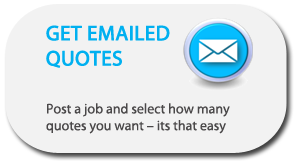
<style>
.page{position:relative;width:294px;height:165px;background:#f2f2f2}
.page>*{position:absolute;margin:0}
.t1{font:14px "MyriadPro-Regular";color:#4a4849}
.t2{font:21px "MyriadPro-Regular";color:#00b0f0;font-weight:bold}
</style>
<div class="page">
<p class="t1" style="left:46px;top:25px;width:184px;height:109px"><span class="t2">GET EMAILED <br>QUOTES<br><br><br></span>Post a job and select how many quotes you want – its that easy</p>
</div>
